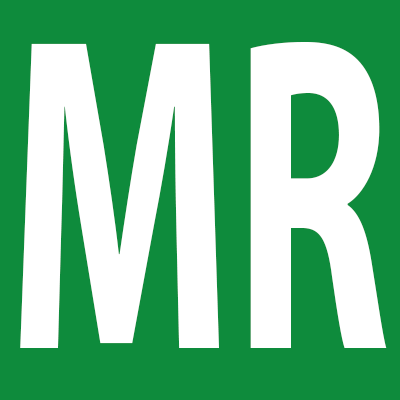
<style>
.page{position:relative;width:400px;height:400px;background:#0e8b3c}
.page>*{position:absolute;margin:0}
.t1{font:450.8px "MyriadPro-Bold";color:#ffffff;scale:0.59 1}
</style>
<div class="page">
<p class="t1" style="left:20px;top:41px;width:367px;height:307px">MR</p>
</div>
